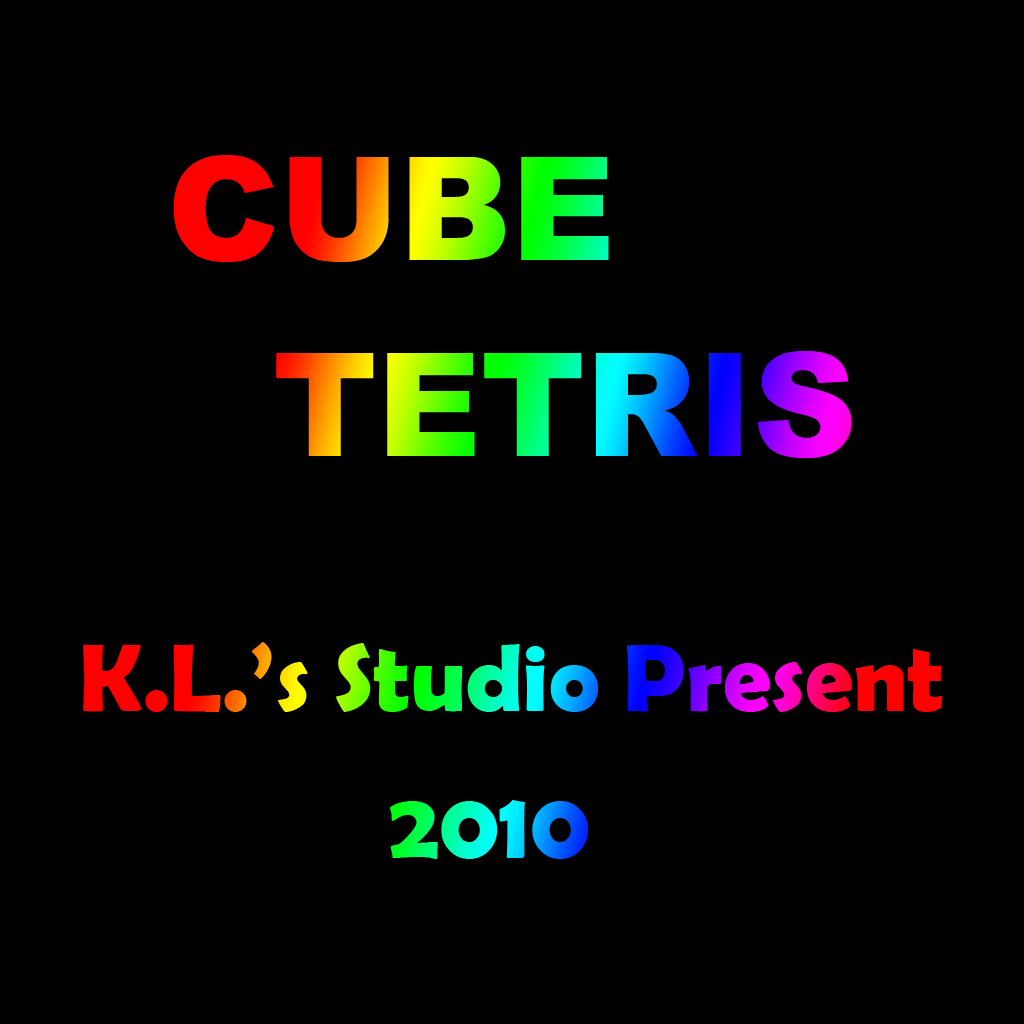
<style>
.page{position:relative;width:1024px;height:1024px;background:#000000}
.page>*{position:absolute;margin:0}
.t1{font:144px "Arial-Black"}
.t2{font:96px "BerlinSansFBDemi-Bold"}
</style>
<div class="page">
<p class="t1" style="left:173px;top:155px;width:436px;height:107px">CUBE</p>
<p class="t1" style="left:276px;top:351px;width:576px;height:107px">TETRIS</p>
<p class="t2" style="left:83px;top:642px;width:860px;height:70px">K.L.’s Studio Present</p>
<p class="t2" style="left:390px;top:800px;width:199px;height:59px">2010</p>
</div>
